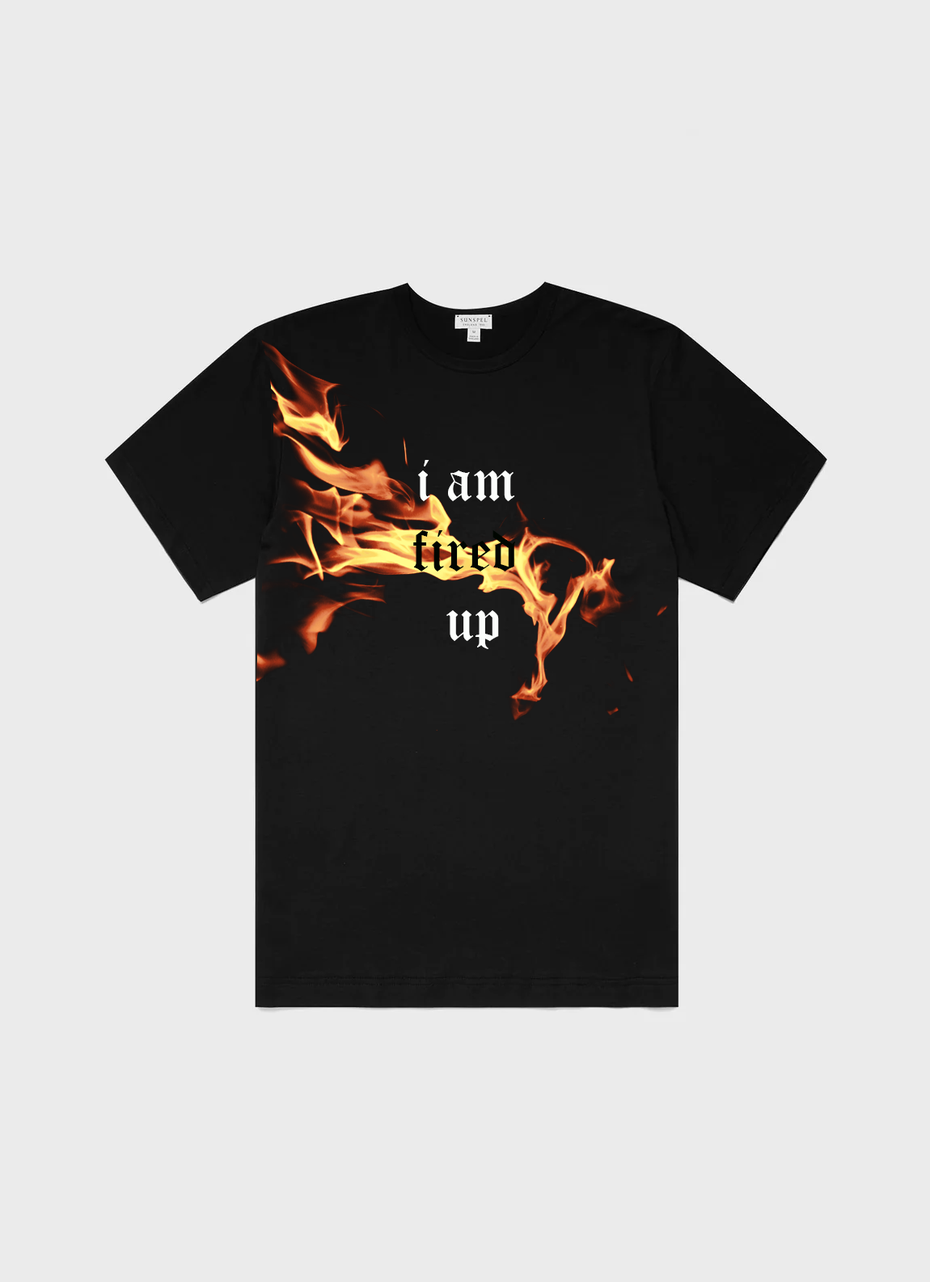
<style>
.page{position:relative;width:930px;height:1282px;background:#ebebeb}
.page>*{position:absolute;margin:0}
.t1{font:58.2px "OldEnglishTextMT";color:#000601}
.t2{font:58.2px "OldEnglishTextMT";color:#fcfefc}
</style>
<div class="page">
<p class="t1" style="left:413px;top:460px;width:102px;height:189px;text-align:center"><span class="t2">i am <br></span>fired <br><span class="t2">up</span></p>
</div>
